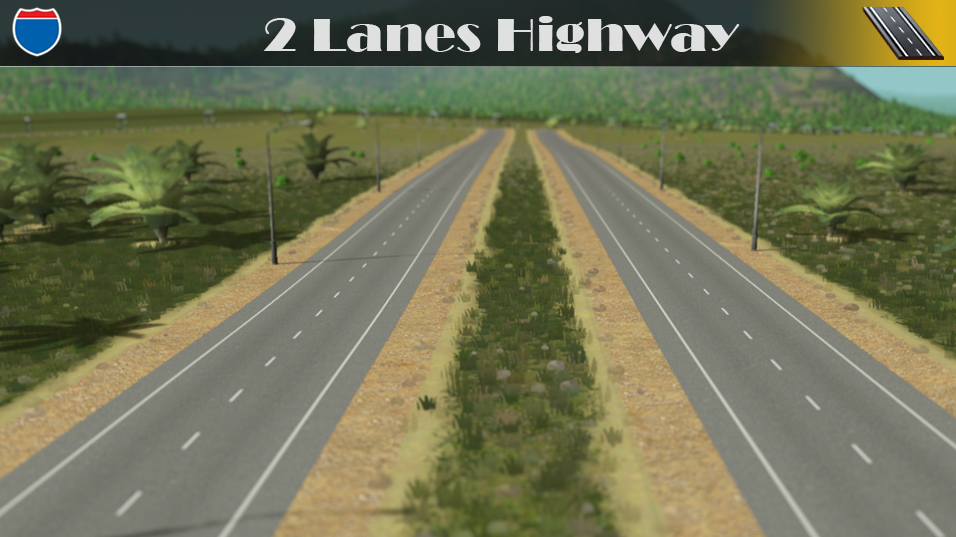
<style>
.page{position:relative;width:956px;height:537px}
.page>*{position:absolute;margin:0}
.t1{font:48px "Broadway";color:#dfe0df;scale:1.11 1}
</style>
<div class="page">
<p class="t1" style="left:263px;top:16px;width:477px;height:37px">2 Lanes Highway</p>
</div>
